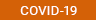
<style>
.page{position:relative;width:96px;height:20px;background:#d46107}
.page>*{position:absolute;margin:0}
.t1{font:13px "Roboto-Regular";letter-spacing:0.025em;color:#ffffff}
</style>
<div class="page">
<p class="t1" style="left:20px;top:6px;width:57px;height:9px">COVID-19</p>
</div>
